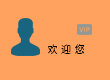
<style>
.page{position:relative;width:110px;height:80px;background:#ffa25f}
.page>*{position:absolute;margin:0}
.t1{font:10px "SourceHanSansCN-Light";letter-spacing:0.36em;color:#000000}
</style>
<div class="page">
<p class="t1" style="left:47px;top:44px;width:37px;height:10px">欢迎您</p>
</div>
